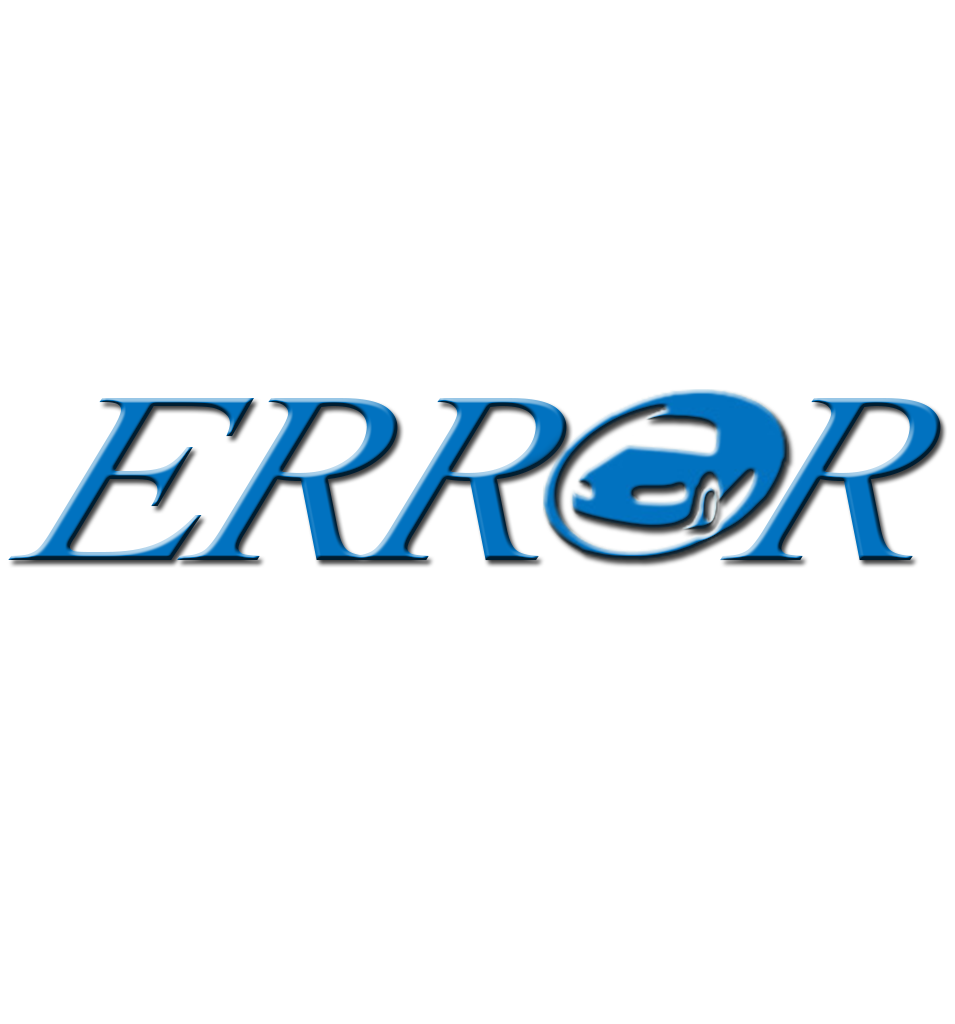
<style>
.page{position:relative;width:955px;height:1024px;background:#ffffff}
.page>*{position:absolute;margin:0}
.t1{font:244.7px "TimesNewRomanPS-ItalicMT";letter-spacing:-0.08em;font-style:italic;scale:1.3 1}
</style>
<div class="page">
<p class="t1" style="left:8px;top:395px;width:933px;height:168px">ERROR</p>
</div>
